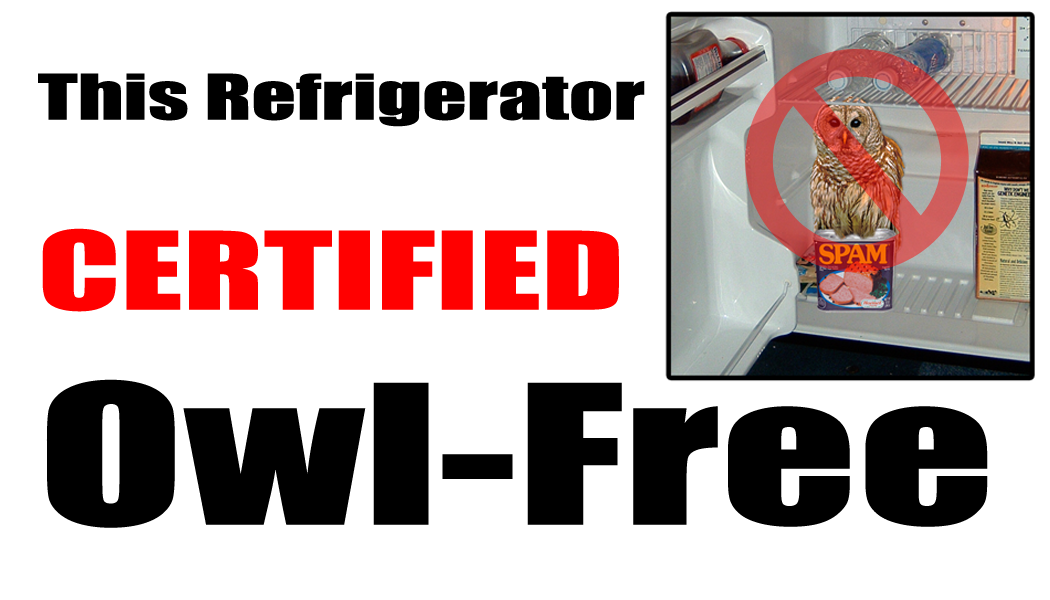
<style>
.page{position:relative;width:1050px;height:600px;background:#ffffff}
.page>*{position:absolute;margin:0}
.t1{font:58.3px "Impact";color:#000000;scale:1.5 1}
.t2{font:100px "Impact";color:#ff0000;scale:1.5 1}
.t3{font:179.2px "Impact";color:#000000;scale:1.5 1}
</style>
<div class="page">
<p class="t1" style="left:38px;top:73px;width:950px;height:455px">This Refrigerator<br><br><span class="t2">CERTIFIED<br></span><span class="t3">Owl-Free</span></p>
</div>
